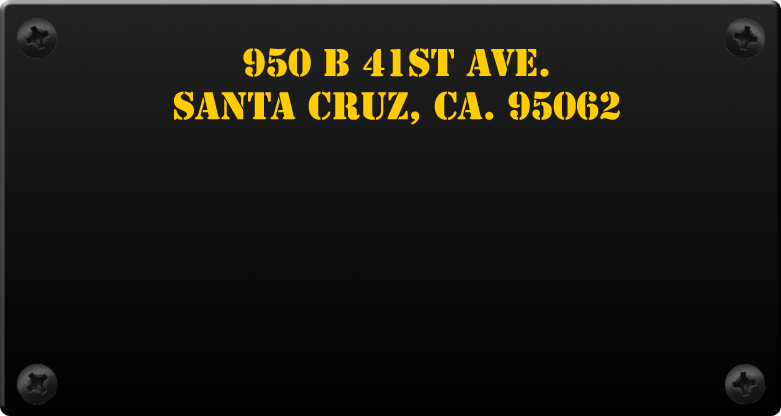
<style>
.page{position:relative;width:781px;height:416px}
.page>*{position:absolute;margin:0}
.t1{font:36px "StencilStd";color:#ffcc00}
</style>
<div class="page">
<p class="t1" style="left:174px;top:48px;width:446px;height:77px;text-align:center">950 B 41st Ave.<br>Santa Cruz, Ca. 95062</p>
</div>
